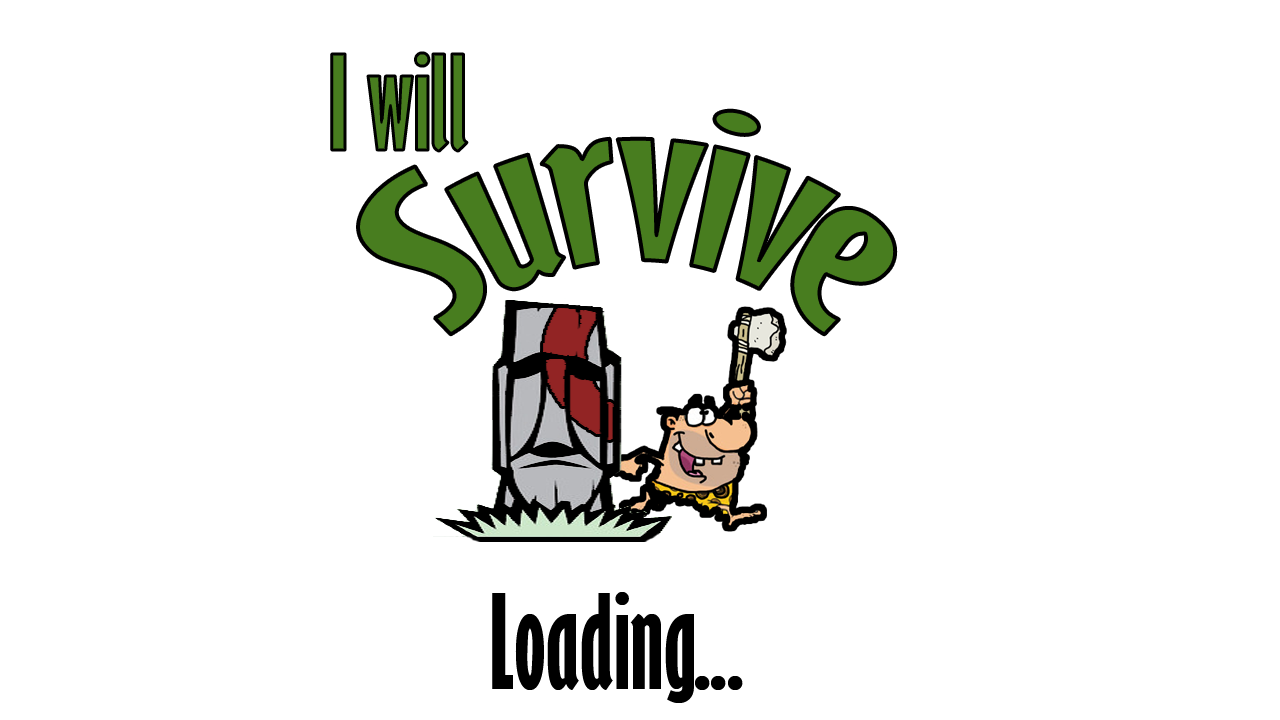
<style>
.page{position:relative;width:1280px;height:720px;background:#ffffff}
.page>*{position:absolute;margin:0}
.t1{font:121px "GillSansMT-ExtraCondensedBold";color:#487d1f}
.t2{font:198px "GillSansMT-ExtraCondensedBold";color:#487d1f}
.t3{font:121px "GillSansMT-ExtraCondensedBold";color:#000000}
</style>
<div class="page">
<p class="t1" style="left:331px;top:53px;width:136px;height:98px">I will</p>
<p class="t2" style="left:358px;top:110px;width:538px;height:225px">Survive</p>
<p class="t3" style="left:492px;top:592px;width:251px;height:111px">Loading...</p>
</div>
